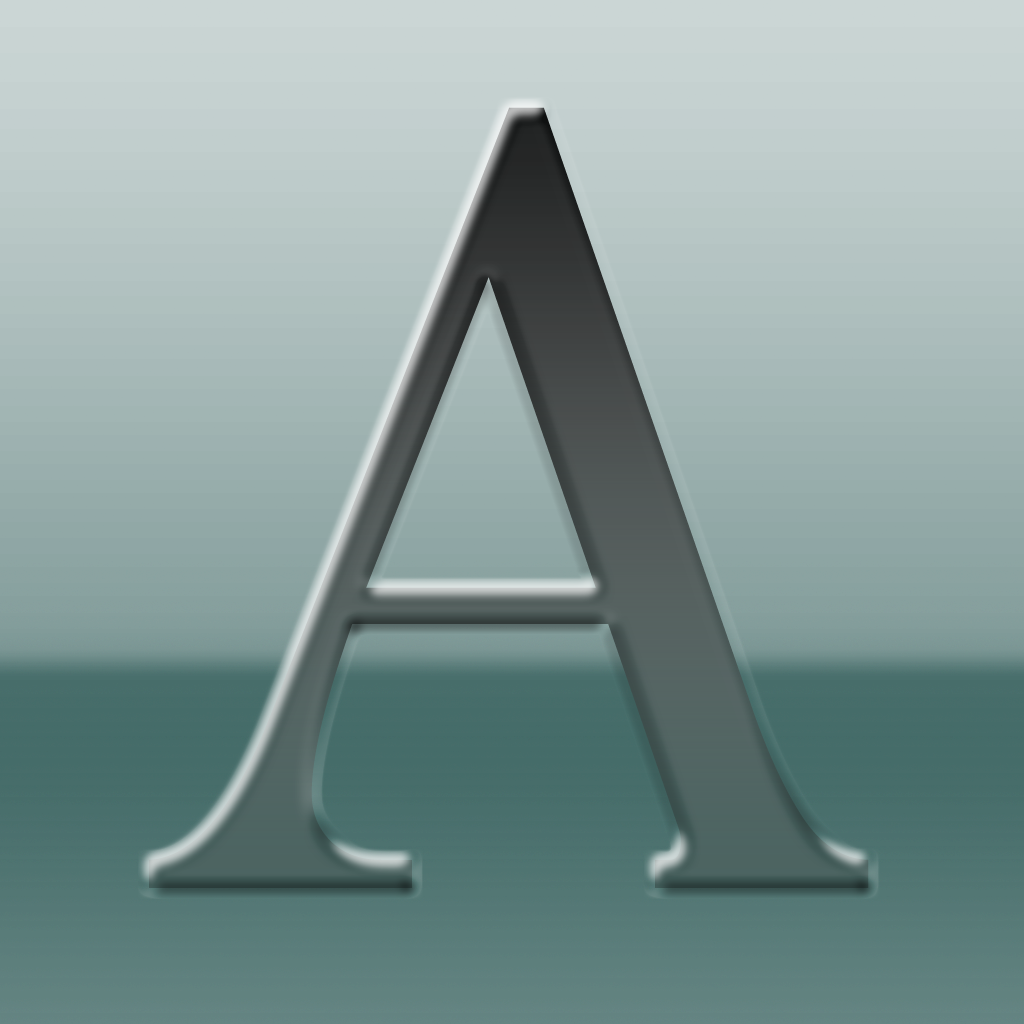
<style>
.page{position:relative;width:1024px;height:1024px}
.page>*{position:absolute;margin:0}
.t1{font:1200px "FootlightMTLight"}
</style>
<div class="page">
<p class="t1" style="left:149px;top:107px;width:720px;height:781px">A</p>
</div>
